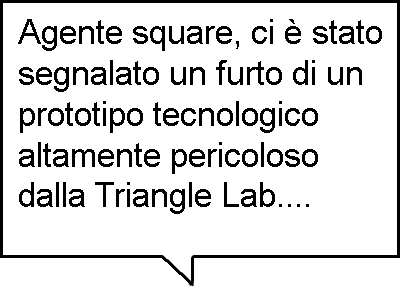
<style>
.page{position:relative;width:400px;height:300px;background:#ffffff}
.page>*{position:absolute;margin:0}
.t1{font:34px "ArialMT";color:#000000}
</style>
<div class="page">
<p class="t1" style="left:18px;top:19px;width:364px;height:195px">Agente square, ci è stato<br>segnalato un furto di un<br>prototipo tecnologico<br>altamente pericoloso<br>dalla Triangle Lab....</p>
</div>
